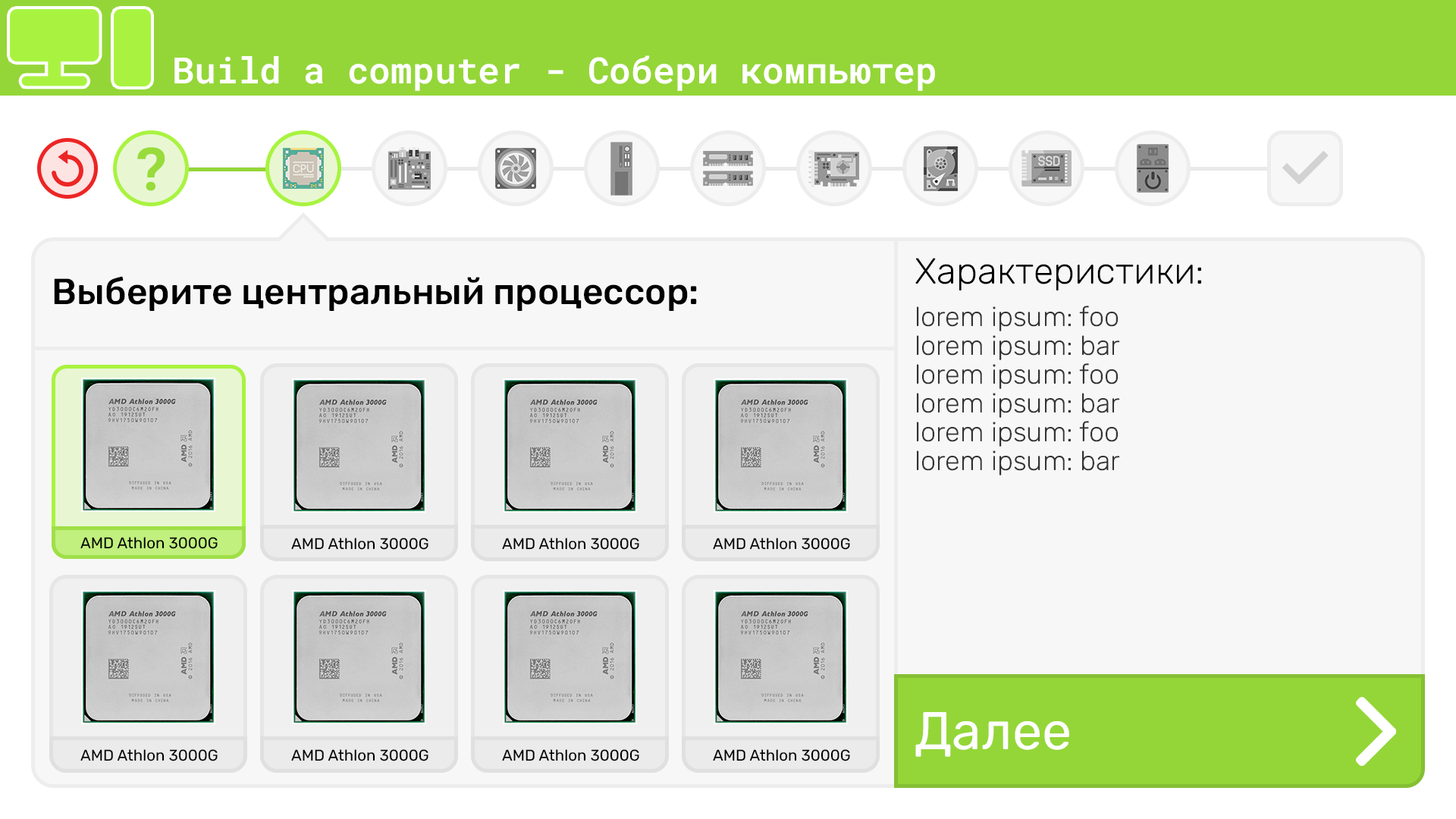
<style>
.page{position:relative;width:1456px;height:819px;background:#f7f7f7}
.page>*{position:absolute;margin:0}
.t1{font:36.4px "RobotoMono-SemiBold";color:#ffffff}
.t2{font:59.7px "RobotoMono-Bold";color:#98db3a}
.t3{font:36.4px "Rubik-Light";color:#000000}
.t4{font:36.4px "Rubik-Medium";color:#000000}
.t5{font:27.3px/28.8px "Rubik-Light";color:#333333}
.t6{font:15.5px "Rubik-Regular";color:#000000}
.t7{font:53.1px "Rubik-Regular";color:#fefefe}
</style>
<div class="page">
<p class="t1" style="left:174px;top:55px;width:761px;height:36px">Build a computer - Собери компьютер</p>
<p class="t2" style="left:137px;top:147px;width:28px;height:44px">?</p>
<p class="t3" style="left:915px;top:258px;width:286px;height:32px">Характеристики:</p>
<p class="t4" style="left:54px;top:276px;width:643px;height:35px">Выберите центральный процессор:</p>
<p class="t5" style="left:917px;top:306px;width:203px;height:169px">lorem ipsum: foo<br>lorem ipsum: bar<br>lorem ipsum: foo<br>lorem ipsum: bar<br>lorem ipsum: foo<br>lorem ipsum: bar</p>
<p class="t6" style="left:80px;top:537px;width:138px;height:12px">AMD Athlon 3000G</p>
<p class="t6" style="left:291px;top:538px;width:137px;height:12px">AMD Athlon 3000G</p>
<p class="t6" style="left:502px;top:538px;width:137px;height:12px">AMD Athlon 3000G</p>
<p class="t6" style="left:713px;top:538px;width:137px;height:12px">AMD Athlon 3000G</p>
<p class="t7" style="left:915px;top:712px;width:154px;height:45px">Далее</p>
<p class="t6" style="left:80px;top:749px;width:138px;height:12px">AMD Athlon 3000G</p>
<p class="t6" style="left:291px;top:749px;width:137px;height:12px">AMD Athlon 3000G</p>
<p class="t6" style="left:502px;top:749px;width:137px;height:12px">AMD Athlon 3000G</p>
<p class="t6" style="left:713px;top:749px;width:137px;height:12px">AMD Athlon 3000G</p>
</div>
